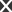
<style>
.page{position:relative;width:12px;height:12px;background:#333333}
.page>*{position:absolute;margin:0}
.t1{font:21.8px "Tahoma";color:#ffffff;scale:1.3 1}
</style>
<div class="page">
<p class="t1" style="left:0px;top:0px;width:13px;height:12px">x</p>
</div>
